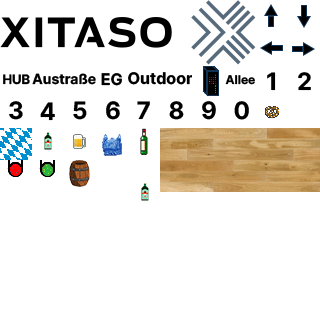
<style>
.page{position:relative;width:320px;height:320px;background:#ffffff}
.page>*{position:absolute;margin:0}
.t1{font:13px "Inter-Bold";color:#000000}
.t2{font:14px "Inter-Bold";color:#000000}
.t3{font:16px "Inter-Bold";color:#000000}
.t4{font:12px "Inter-Bold";color:#000000}
.t5{font:24px "Inter-Bold";color:#000000}
</style>
<div class="page">
<p class="t1" style="left:3px;top:74px;width:27px;height:11px">HUB</p>
<p class="t2" style="left:32px;top:73px;width:64px;height:12px">Austraße</p>
<p class="t3" style="left:101px;top:73px;width:21px;height:13px">EG</p>
<p class="t4" style="left:225px;top:75px;width:30px;height:10px">Allee</p>
<p class="t5" style="left:267px;top:72px;width:9px;height:19px">1</p>
<p class="t5" style="left:298px;top:72px;width:13px;height:19px">2</p>
<p class="t5" style="left:9px;top:101px;width:14px;height:19px">3</p>
<p class="t5" style="left:40px;top:102px;width:15px;height:19px">4</p>
<p class="t5" style="left:73px;top:101px;width:14px;height:19px">5</p>
<p class="t5" style="left:106px;top:101px;width:14px;height:19px">6</p>
<p class="t5" style="left:137px;top:101px;width:13px;height:19px">7</p>
<p class="t5" style="left:169px;top:101px;width:15px;height:19px">8</p>
<p class="t5" style="left:202px;top:101px;width:14px;height:19px">9</p>
<p class="t5" style="left:234px;top:101px;width:15px;height:19px">0</p>
</div>
